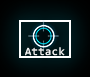
<style>
.page{position:relative;width:90px;height:77px}
.page>*{position:absolute;margin:0}
.t1{font:11.1px "Consolas";letter-spacing:0.05em;color:#feffff}
</style>
<div class="page">
<p class="t1" style="left:25px;top:47px;width:40px;height:9px">Attack</p>
</div>
